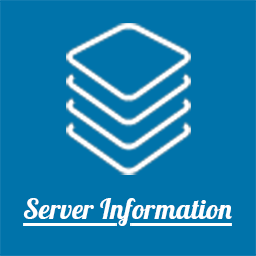
<style>
.page{position:relative;width:256px;height:256px;background:#0073aa}
.page>*{position:absolute;margin:0}
.t1{font:28.2px "Lobster-Regular";color:#ffffff}
</style>
<div class="page">
<p class="t1" style="left:23px;top:198px;width:209px;height:28px">Server Information</p>
</div>
